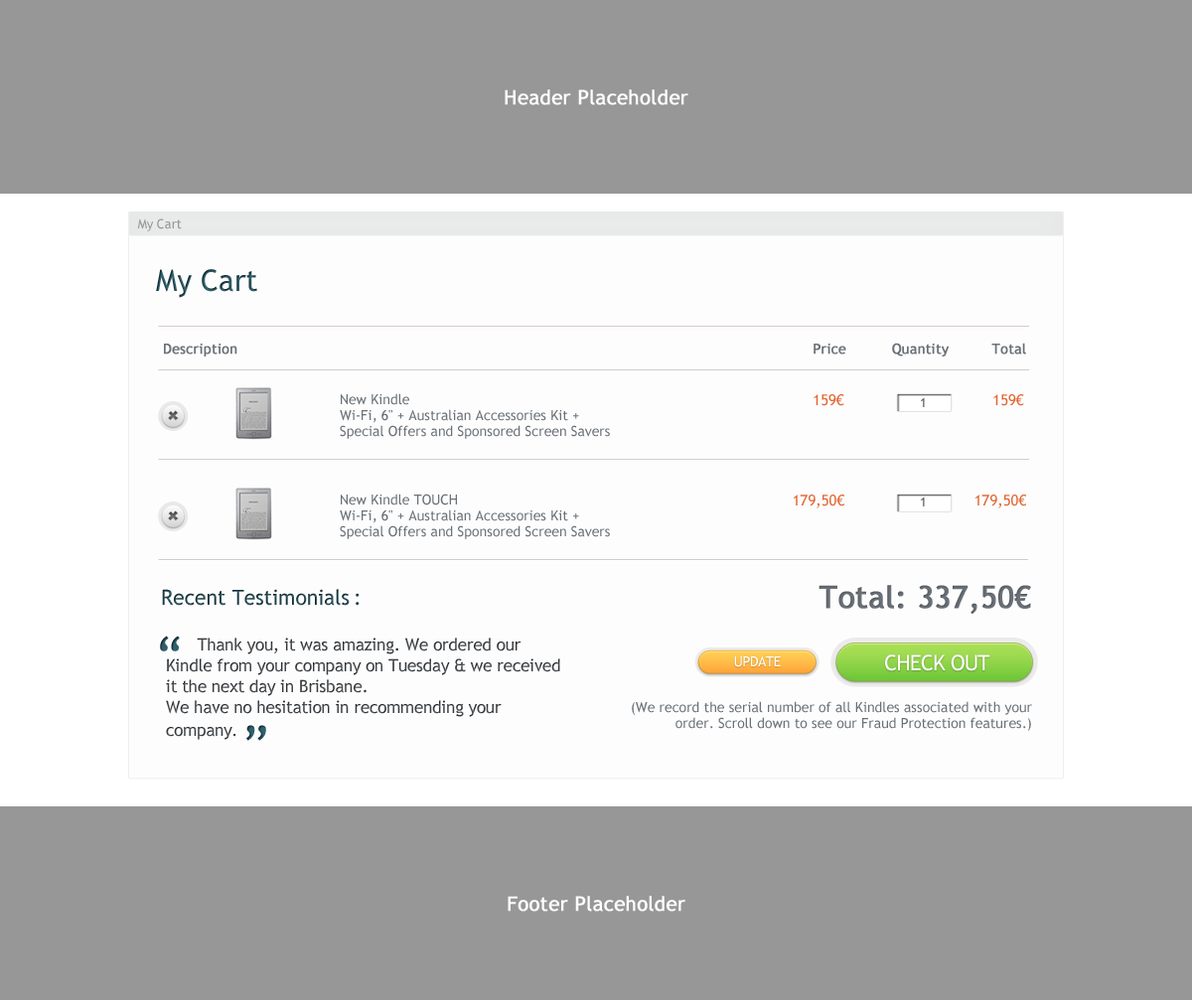
<style>
.page{position:relative;width:1192px;height:1000px;background:#979797}
.page>*{position:absolute;margin:0}
.t1{font:19.9px "TrebuchetMS";color:#ffffff;font-weight:bold}
.t2{font:12.9px "TrebuchetMS";color:#979799}
.t3{font:29.8px "TrebuchetMS";color:#26505b}
.t4{font:13.9px "TrebuchetMS";color:#6a7178;font-weight:bold}
.t5{font:13.9px/15.9px "TrebuchetMS";color:#6a7178}
.t6{font:14.9px "TrebuchetMS";color:#e26735}
.t7{font:12.9px "TrebuchetMS";color:#555555}
.t8{font:20.9px "TrebuchetMS"}
.t9{font:30.8px "TrebuchetMS";color:#6a7178;font-weight:bold}
.t10{font:16.9px/20.9px "TrebuchetMS";letter-spacing:-0.01em;color:#394044}
.t11{font:50.7px/22.8px "TrebuchetMS";letter-spacing:-0.01em;color:#394044}
.t12{font:15.9px/20.9px "TrebuchetMS";letter-spacing:-0.01em;color:#394044}
.t13{font:14px "TrebuchetMS";letter-spacing:-0.025em;color:#ffffff;text-transform:uppercase}
.t14{font:21.5px "TrebuchetMS";letter-spacing:-0.025em;color:#ffffff;text-transform:uppercase}
</style>
<div class="page">
<p class="t1" style="left:505px;top:89px;width:183px;height:16px">Header Placeholder</p>
<p class="t2" style="left:137px;top:219px;width:45px;height:12px">My Cart</p>
<p class="t3" style="left:156px;top:269px;width:101px;height:29px">My Cart</p>
<p class="t4" style="left:164px;top:343px;width:786px;height:14px">Description                               Price          Quantity</p>
<p class="t4" style="left:991px;top:343px;width:35px;height:12px">Total</p>
<p class="t5" style="left:340px;top:393px;width:270px;height:46px">New Kindle <br>Wi-Fi, 6" + Australian Accessories Kit + Special Offers and Sponsored Screen Savers</p>
<p class="t6" style="left:814px;top:394px;width:30px;height:12px">159€</p>
<p class="t7" style="left:921px;top:397px;width:4px;height:10px">1</p>
<p class="t6" style="left:993px;top:394px;width:31px;height:12px">159€</p>
<p class="t5" style="left:340px;top:494px;width:270px;height:45px">New Kindle TOUCH<br>Wi-Fi, 6" + Australian Accessories Kit + Special Offers and Sponsored Screen Savers</p>
<p class="t6" style="left:794px;top:495px;width:51px;height:14px">179,50€</p>
<p class="t7" style="left:921px;top:497px;width:4px;height:10px">1</p>
<p class="t6" style="left:975px;top:495px;width:52px;height:14px">179,50€</p>
<p class="t8" style="left:162px;top:589px;width:198px;height:17px">Recent Testimonials:</p>
<p class="t9" style="left:819px;top:585px;width:212px;height:29px">Total: 337,50€</p>
<p class="t10" style="left:160px;top:636px;width:400px;height:105px"><span class="t11">“ </span>Thank you, it was amazing. We ordered our Kindle from your company on Tuesday &amp; we received it the next day in Brisbane. <br>We have no hesitation in recommending your company<span class="t12">. </span><span class="t11">”</span></p>
<p class="t13" style="left:734px;top:656px;width:47px;height:12px">UPDATE</p>
<p class="t14" style="left:885px;top:655px;width:105px;height:17px">CHECK OUT</p>
<p class="t5" style="left:632px;top:701px;width:400px;height:30px;text-align:right">(We record the serial number of all Kindles associated with your order. Scroll down to see our Fraud Protection features.)</p>
<p class="t1" style="left:508px;top:896px;width:177px;height:16px">Footer Placeholder</p>
</div>
